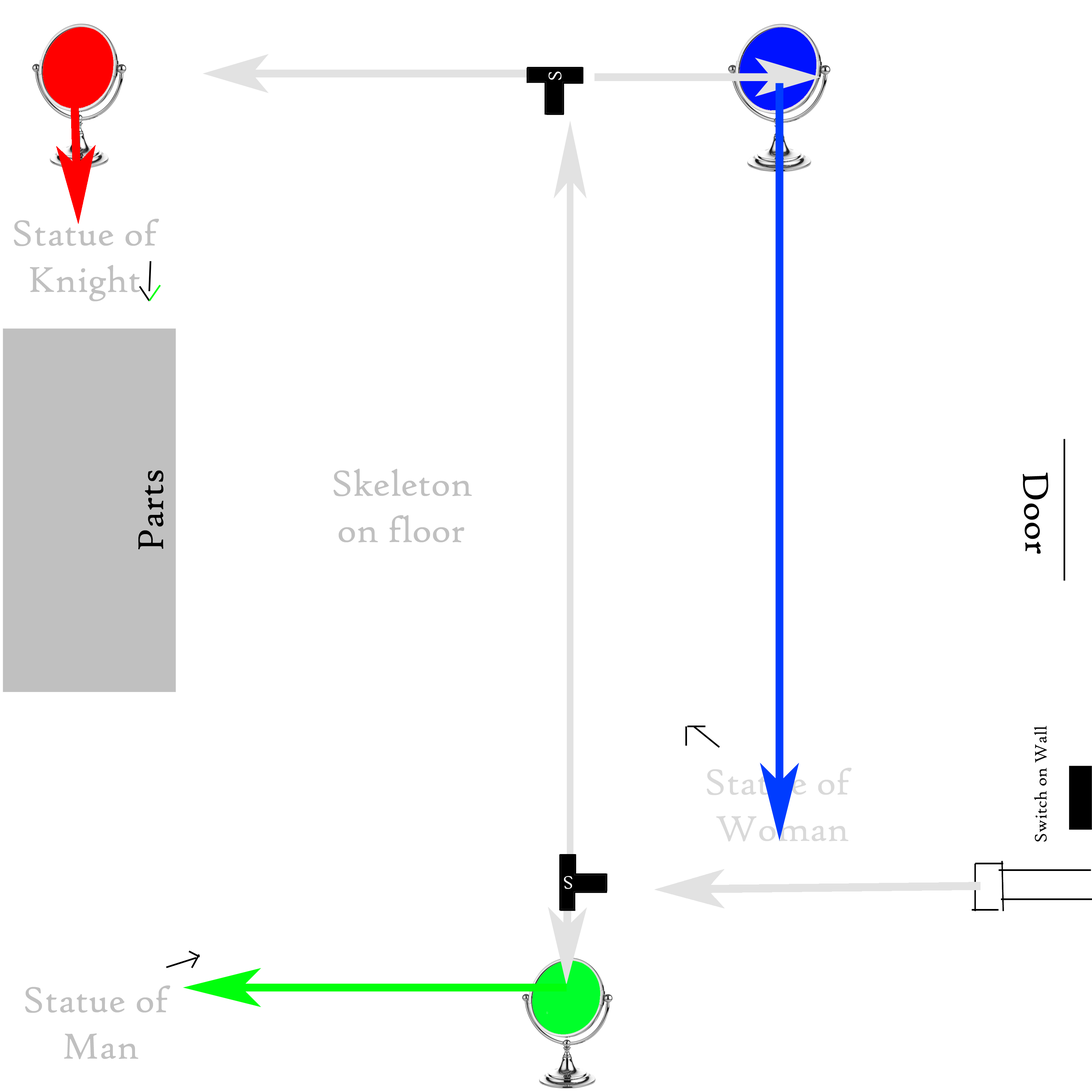
<style>
.page{position:relative;width:1092px;height:1092px;background:#ffffff}
.page>*{position:absolute;margin:0}
.t1{font:38.6px "HighTowerText-Reg";color:#c0c0c0}
.t2{font:38.6px "HighTowerText-Reg";color:#000000}
.t3{font:17.7px "HighTowerText-Reg";color:#000000}
.t4{font:38.6px "HighTowerText-Reg";color:#d9d9d9}
</style>
<div class="page">
<p class="t1" style="left:14px;top:219px;width:145px;height:82px;text-align:center">Statue of<br>Knight</p>
<p class="t2" style="left:138px;top:470px;width:25px;height:79px;rotate:-90deg">Parts</p>
<p class="t1" style="left:334px;top:469px;width:138px;height:73px;text-align:center">Skeleton<br>on floor</p>
<p class="t3" style="left:1034px;top:726px;width:13px;height:116px;rotate:-90deg">Switch on Wall</p>
<p class="t4" style="left:707px;top:768px;width:145px;height:73px;text-align:center">Statue of <br>Woman</p>
<p class="t1" style="left:25px;top:985px;width:145px;height:74px;text-align:center">Statue of <br>Man</p>
</div>
